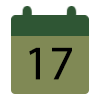
<style>
.page{position:relative;width:100px;height:100px;background:#808955}
.page>*{position:absolute;margin:0}
.t1{font:48.6px "MyriadPro-Regular";color:#000000}
</style>
<div class="page">
<p class="t1" style="left:29px;top:47px;width:43px;height:33px">17</p>
</div>
